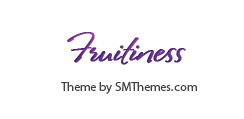
<style>
.page{position:relative;width:244px;height:119px;background:#ffffff}
.page>*{position:absolute;margin:0}
.t1{font:37.5px "RosaMarena";font-weight:bold}
.t2{font:12.5px "MyriadPro-Regular";color:#424242}
</style>
<div class="page">
<p class="t1" style="left:67px;top:32px;width:119px;height:33px">Fruitiness</p>
<p class="t2" style="left:61px;top:82px;width:136px;height:12px">Theme by SMThemes.com</p>
</div>
